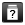
<style>
.page{position:relative;width:25px;height:25px;background:#ffffff}
.page>*{position:absolute;margin:0}
.t1{font:11px "ArialMT";color:#000000}
</style>
<div class="page">
<p class="t1" style="left:10px;top:10px;width:6px;height:8px">?</p>
</div>
